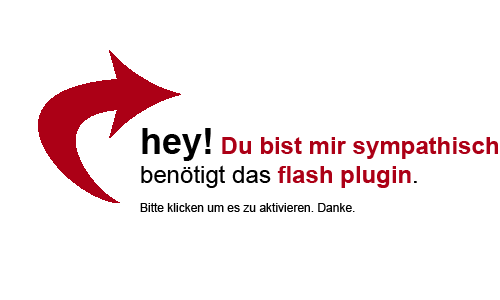
<style>
.page{position:relative;width:500px;height:300px;background:#ffffff}
.page>*{position:absolute;margin:0}
.t1{font:12px "ArialMT";color:#000000}
.t2{font:36px "Arial-BoldMT";color:#000000}
.t3{font:24px "Arial-BoldMT";color:#ac0016}
.t4{font:24px "ArialMT";color:#000000}
</style>
<div class="page">
<p class="t1" style="left:140px;top:128px;width:358px;height:84px"><span class="t2">hey! </span><span class="t3">Du bist mir sympathisch<br></span><span class="t4">benötigt das </span><span class="t3">flash plugin</span><span class="t4">.<br></span><br>Bitte klicken um es zu aktivieren. Danke.</p>
</div>
